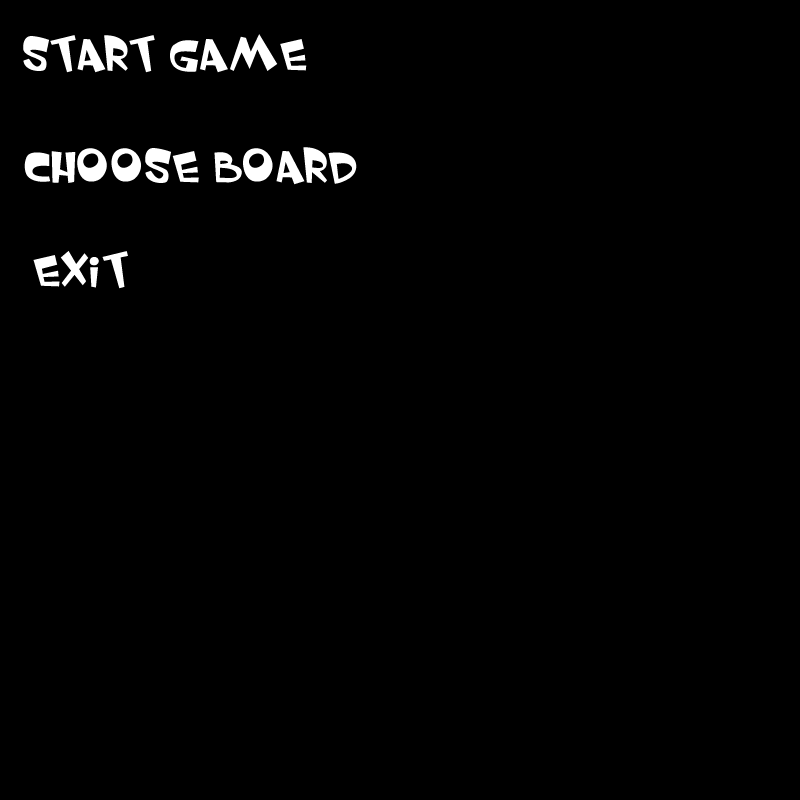
<style>
.page{position:relative;width:800px;height:800px;background:#000000}
.page>*{position:absolute;margin:0}
.t1{font:48px "WhimsyTT";color:#ffffff}
</style>
<div class="page">
<p class="t1" style="left:23px;top:34px;width:284px;height:39px">start game</p>
<p class="t1" style="left:24px;top:147px;width:333px;height:38px">choose board</p>
<p class="t1" style="left:33px;top:251px;width:95px;height:38px">exit</p>
</div>
